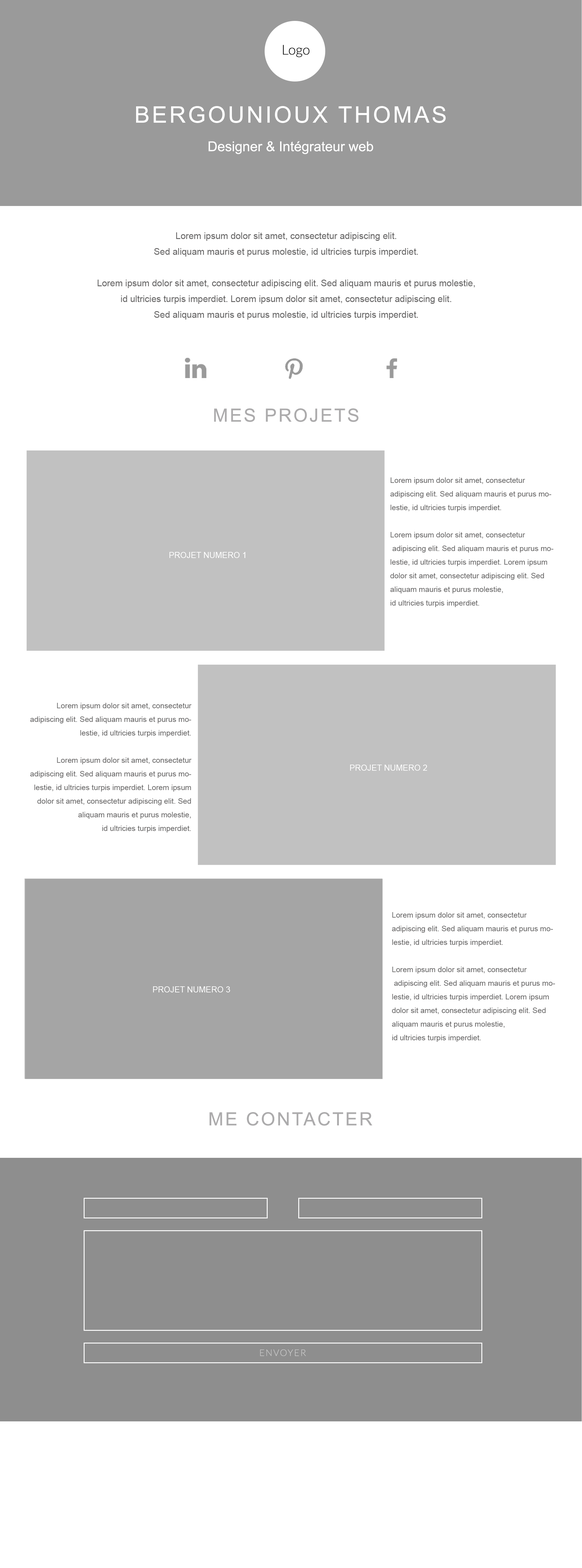
<style>
.page{position:relative;width:582px;height:1568px;background:#ffffff}
.page>*{position:absolute;margin:0}
.t1{font:13.6px "Lato-Light";color:#000000}
.t2{font:22.7px "ArialMT";letter-spacing:0.1em;color:#ffffff}
.t3{font:13.6px "ArialMT";color:#ffffff}
.t4{font:9.1px/15.8px "ArialMT";color:#686767}
.t5{font:18.2px "ArialMT";letter-spacing:0.1em;color:#acabac}
.t6{font:7.6px/13.6px "ArialMT";color:#686767}
.t7{font:8.2px "ArialMT";color:#ffffff}
.t8{font:9.1px "Lato-Light";letter-spacing:0.1em;color:#cccccc}
</style>
<div class="page">
<p class="t1" style="left:283px;top:45px;width:26px;height:12px">Logo</p>
<p class="t2" style="left:136px;top:106px;width:310px;height:17px">BERGOUNIOUX THOMAS</p>
<p class="t3" style="left:208px;top:141px;width:165px;height:13px">Designer &amp; Intégrateur web</p>
<p class="t4" style="left:98px;top:232px;width:377px;height:88px;text-align:center">Lorem ipsum dolor sit amet, consectetur adipiscing elit. <br>Sed aliquam mauris et purus molestie, id ultricies turpis imperdiet. <br><br>Lorem ipsum dolor sit amet, consectetur adipiscing elit. Sed aliquam mauris et purus molestie, <br>id ultricies turpis imperdiet. Lorem ipsum dolor sit amet, consectetur adipiscing elit. <br>Sed aliquam mauris et purus molestie, id ultricies turpis imperdiet.</p>
<p class="t5" style="left:214px;top:408px;width:144px;height:14px">MES PROJETS</p>
<p class="t6" style="left:390px;top:477px;width:163px;height:130px">Lorem ipsum dolor sit amet, consectetur <br>adipiscing elit. Sed aliquam mauris et purus molestie, id ultricies turpis imperdiet. <br><br>Lorem ipsum dolor sit amet, consectetur<br> adipiscing elit. Sed aliquam mauris et purus molestie, id ultricies turpis imperdiet. Lorem ipsum dolor sit amet, consectetur adipiscing elit. Sed aliquam mauris et purus molestie, <br>id ultricies turpis imperdiet.</p>
<p class="t7" style="left:169px;top:552px;width:76px;height:6px">PROJET NUMERO 1</p>
<p class="t6" style="left:30px;top:703px;width:161px;height:129px;text-align:right">Lorem ipsum dolor sit amet, consectetur <br>adipiscing elit. Sed aliquam mauris et purus molestie, id ultricies turpis imperdiet. <br><br>Lorem ipsum dolor sit amet, consectetur<br> adipiscing elit. Sed aliquam mauris et purus molestie, id ultricies turpis imperdiet. Lorem ipsum dolor sit amet, consectetur adipiscing elit. Sed aliquam mauris et purus molestie, <br>id ultricies turpis imperdiet.</p>
<p class="t7" style="left:350px;top:765px;width:77px;height:6px">PROJET NUMERO 2</p>
<p class="t6" style="left:392px;top:912px;width:163px;height:130px">Lorem ipsum dolor sit amet, consectetur <br>adipiscing elit. Sed aliquam mauris et purus molestie, id ultricies turpis imperdiet. <br><br>Lorem ipsum dolor sit amet, consectetur<br> adipiscing elit. Sed aliquam mauris et purus molestie, id ultricies turpis imperdiet. Lorem ipsum dolor sit amet, consectetur adipiscing elit. Sed aliquam mauris et purus molestie, <br>id ultricies turpis imperdiet.</p>
<p class="t7" style="left:153px;top:986px;width:77px;height:6px">PROJET NUMERO 3</p>
<p class="t5" style="left:209px;top:1112px;width:163px;height:14px">ME CONTACTER</p>
<p class="t8" style="left:260px;top:1349px;width:46px;height:7px">ENVOYER</p>
</div>
